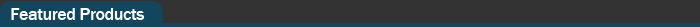
<style>
.page{position:relative;width:700px;height:27px;background:#333333}
.page>*{position:absolute;margin:0}
.t1{font:18px "FranklinGothic-Medium";letter-spacing:-0.025em;color:#ffffff}
</style>
<div class="page">
<p class="t1" style="left:11px;top:8px;width:134px;height:12px">Featured Products</p>
</div>
